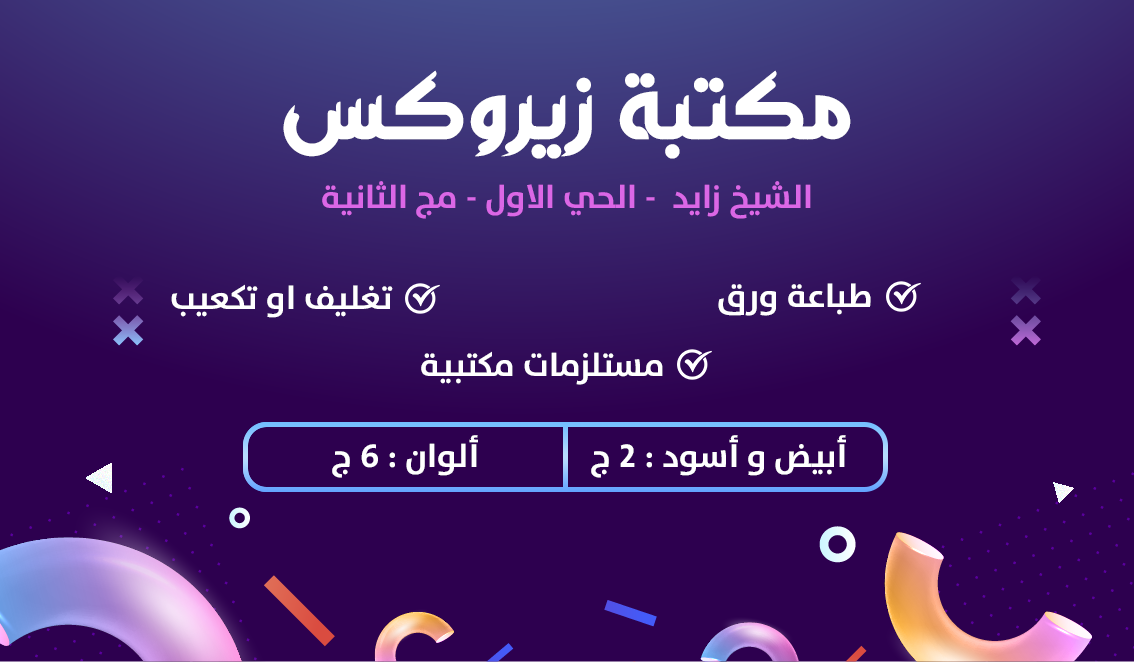
<style>
.page{position:relative;width:1134px;height:662px;background:#2d004f}
.page>*{position:absolute;margin:0}
.t1{font:94.4px "18KhebratMusamimBold";color:#ffffff}
.t2{font:33px "TheSans-Bold";color:#db67e6}
.t3{font:33.2px "TheSans-Bold";color:#ffffff}
.t4{font:33.3px "TheSans-Bold";color:#ffffff}
.t5{font:33.1px "TheSans-Bold";color:#ffffff}
</style>
<div class="page">
<p class="t1" style="left:283px;top:70px;width:568px;height:89px">مكتبة زيروكس</p>
<p class="t2" style="left:322px;top:181px;width:489px;height:38px">الشيخ زايد  - الحي الاول - مج الثانية</p>
<p class="t3" style="left:171px;top:284px;width:222px;height:34px">تغليف او تكعيب</p>
<p class="t4" style="left:718px;top:283px;width:153px;height:33px">طباعة ورق</p>
<p class="t5" style="left:421px;top:351px;width:242px;height:34px">مستلزمات مكتبية</p>
<p class="t5" style="left:332px;top:435px;width:146px;height:43px">ألوان : 6 ج</p>
<p class="t5" style="left:591px;top:435px;width:255px;height:43px">أبيض و أسود : 2 ج</p>
</div>
